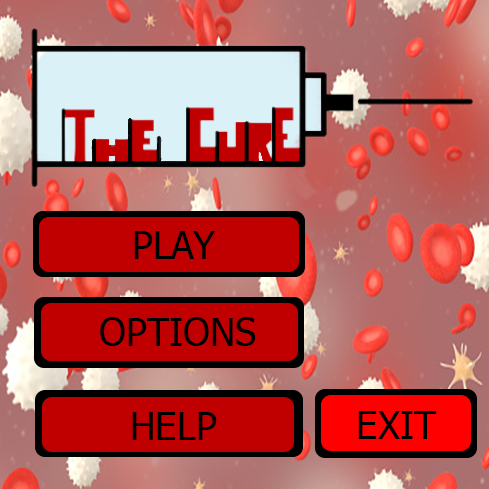
<style>
.page{position:relative;width:489px;height:489px}
.page>*{position:absolute;margin:0}
.t1{font:38px "Tahoma";color:#000000}
</style>
<div class="page">
<p class="t1" style="left:134px;top:231px;width:81px;height:28px">PLAY</p>
<p class="t1" style="left:100px;top:317px;width:156px;height:29px">OPTIONS</p>
<p class="t1" style="left:132px;top:412px;width:85px;height:28px">HELP</p>
<p class="t1" style="left:358px;top:411px;width:79px;height:28px">EXIT</p>
</div>
